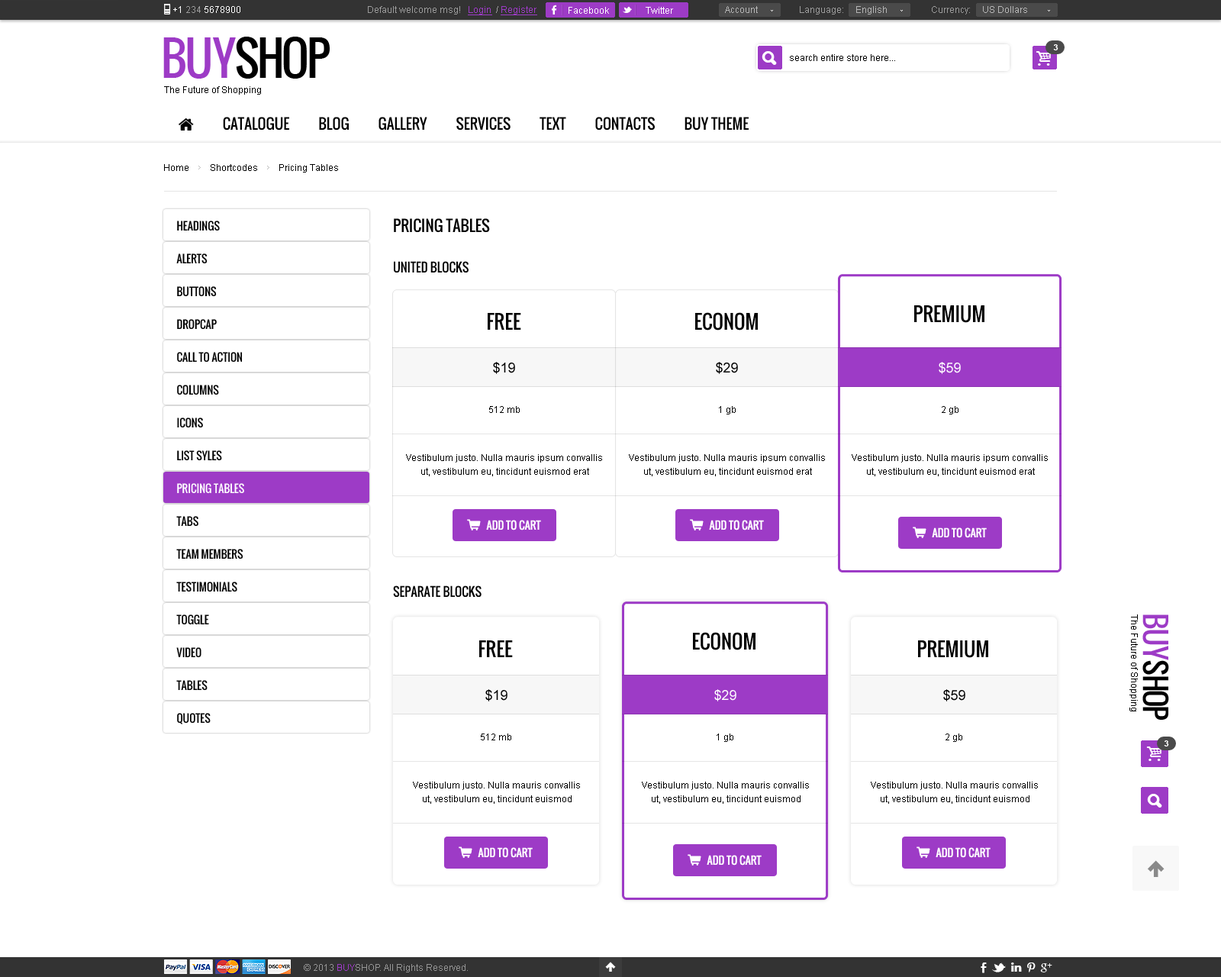
<style>
.page{position:relative;width:1221px;height:977px;background:#ffffff}
.page>*{position:absolute;margin:0}
.t1{font:9.2px "ArialMT";color:#ffffff}
.t2{font:9.2px "ArialMT";color:#9b9b9b}
.t3{font:9.2px "ArialMT";color:#9d3bc6;text-decoration:underline}
.t4{font:9.2px "ArialMT";color:#b6b6b6}
.t5{font:45.8px "Oswald";letter-spacing:-0.06em;color:#000000;text-transform:uppercase}
.t6{font:45.8px "Oswald";letter-spacing:-0.06em;color:#9d3bc6;text-transform:uppercase}
.t7{font:8.4px "Arial-BoldMT";color:#ffffff;text-transform:uppercase}
.t8{font:9.2px "ArialMT";color:#000000}
.t9{font:10.7px/32.8px "Oswald";color:#000000;text-transform:uppercase}
.t10{font:10.7px/32.8px "Oswald";color:#ffffff;text-transform:uppercase}
.t11{font:15.3px "Oswald";color:#000000;text-transform:uppercase}
.t12{font:12.2px "Oswald";color:#000000;text-transform:uppercase}
.t13{font:19.1px "Oswald";color:#000000;text-transform:uppercase}
.t14{font:13.7px "ArialMT";color:#000000}
.t15{font:13.7px "ArialMT";color:#ffffff}
.t16{font:9.2px/13.7px "ArialMT";color:#000000}
.t17{font:10.7px "Oswald";color:#ffffff}
.t18{font:29px "Oswald";letter-spacing:-0.06em;color:#000000;text-transform:uppercase}
.t19{font:29px "Oswald";letter-spacing:-0.06em;color:#9d3bc6;text-transform:uppercase}
.t20{font:9.2px "ArialMT";color:#959595}
.t21{font:9.2px "ArialMT";color:#9d3bc6}
</style>
<div class="page">
<p class="t1" style="left:173px;top:6px;width:67px;height:7px">+1 <span class="t2">234 </span>5678900</p>
<p class="t2" style="left:368px;top:6px;width:169px;height:9px">Default welcome msg!   <span class="t3">Login </span> / <span class="t3">Register</span></p>
<p class="t2" style="left:368px;top:6px;width:169px;height:9px">Default welcome msg!   <span class="t3">Login </span> / <span class="t3">Register</span></p>
<p class="t1" style="left:568px;top:7px;width:41px;height:7px">Facebook</p>
<p class="t1" style="left:646px;top:7px;width:27px;height:7px">Twitter</p>
<p class="t4" style="left:725px;top:6px;width:33px;height:7px">Account</p>
<p class="t2" style="left:800px;top:6px;width:87px;height:8px">Language:     <span class="t4">English</span></p>
<p class="t4" style="left:932px;top:6px;width:95px;height:8px"><span class="t2">Currency:     </span>US Dollars</p>
<p class="t5" style="left:163px;top:37px;width:167px;height:42px"><span class="t6">buy</span>shop</p>
<p class="t7" style="left:1053px;top:44px;width:5px;height:6px">3</p>
<p class="t8" style="left:790px;top:54px;width:105px;height:7px">search entire store here...</p>
<p class="t8" style="left:164px;top:86px;width:97px;height:9px">The Future of Shopping</p>
<p class="t8" style="left:164px;top:164px;width:174px;height:8px">Home         Shortcodes         Pricing Tables</p>
<p class="t9" style="left:176px;top:221px;width:68px;height:503px">Headings<br>Alerts<br>Buttons<br>Dropcap<br>Call To Action<br>Columns<br>Icons<br>List syles<br><span class="t10">Pricing Tables<br></span>Tabs<br>Team Members<br>Testimonials<br>Toggle<br>Video<br>Tables<br>Quotes</p>
<p class="t11" style="left:394px;top:218px;width:96px;height:15px">Pricing tables</p>
<p class="t12" style="left:394px;top:261px;width:75px;height:12px">United BLOCKS</p>
<p class="t13" style="left:914px;top:305px;width:70px;height:18px">PREMIUM</p>
<p class="t13" style="left:488px;top:313px;width:33px;height:17px">FREE</p>
<p class="t13" style="left:695px;top:312px;width:63px;height:18px">ECONOM</p>
<p class="t14" style="left:493px;top:362px;width:22px;height:12px">$19</p>
<p class="t14" style="left:716px;top:362px;width:22px;height:12px">$29</p>
<p class="t15" style="left:939px;top:362px;width:22px;height:12px">$59</p>
<p class="t8" style="left:489px;top:406px;width:31px;height:7px">512 mb</p>
<p class="t8" style="left:719px;top:406px;width:17px;height:8px">1 gb</p>
<p class="t8" style="left:942px;top:406px;width:16px;height:8px">2 gb</p>
<p class="t16" style="left:406px;top:454px;width:196px;height:22px;text-align:center">Vestibulum justo. Nulla mauris ipsum convallis<br>ut, vestibulum eu, tincidunt euismod erat</p>
<p class="t16" style="left:629px;top:454px;width:196px;height:22px;text-align:center">Vestibulum justo. Nulla mauris ipsum convallis<br>ut, vestibulum eu, tincidunt euismod erat</p>
<p class="t16" style="left:852px;top:454px;width:196px;height:22px;text-align:center">Vestibulum justo. Nulla mauris ipsum convallis<br>ut, vestibulum eu, tincidunt euismod erat</p>
<p class="t17" style="left:486px;top:520px;width:55px;height:10px">ADD TO CART</p>
<p class="t17" style="left:709px;top:520px;width:55px;height:10px">ADD TO CART</p>
<p class="t17" style="left:932px;top:527px;width:55px;height:11px">ADD TO CART</p>
<p class="t12" style="left:393px;top:585px;width:88px;height:12px">SEPARATE BLOCKS</p>
<p class="t8" style="left:1129px;top:614px;width:9px;height:97px;rotate:90deg">The Future of Shopping</p>
<p class="t18" style="left:1142px;top:614px;width:27px;height:106px;rotate:90deg"><span class="t19">buy</span>shop</p>
<p class="t13" style="left:479px;top:640px;width:34px;height:17px">FREE</p>
<p class="t13" style="left:693px;top:632px;width:62px;height:18px">ECONOM</p>
<p class="t13" style="left:918px;top:640px;width:70px;height:18px">PREMIUM</p>
<p class="t14" style="left:485px;top:689px;width:22px;height:12px">$19</p>
<p class="t15" style="left:714px;top:689px;width:22px;height:12px">$29</p>
<p class="t14" style="left:943px;top:689px;width:22px;height:12px">$59</p>
<p class="t8" style="left:481px;top:733px;width:30px;height:7px">512 mb</p>
<p class="t8" style="left:717px;top:733px;width:16px;height:9px">1 gb</p>
<p class="t8" style="left:945px;top:733px;width:17px;height:9px">2 gb</p>
<p class="t7" style="left:1164px;top:740px;width:5px;height:6px">3</p>
<p class="t16" style="left:413px;top:781px;width:167px;height:22px;text-align:center">Vestibulum justo. Nulla mauris convallis<br>ut, vestibulum eu, tincidunt euismod</p>
<p class="t16" style="left:642px;top:781px;width:167px;height:22px;text-align:center">Vestibulum justo. Nulla mauris convallis<br>ut, vestibulum eu, tincidunt euismod</p>
<p class="t16" style="left:871px;top:781px;width:167px;height:22px;text-align:center">Vestibulum justo. Nulla mauris convallis<br>ut, vestibulum eu, tincidunt euismod</p>
<p class="t17" style="left:478px;top:847px;width:55px;height:11px">ADD TO CART</p>
<p class="t17" style="left:707px;top:855px;width:55px;height:10px">ADD TO CART</p>
<p class="t17" style="left:935px;top:847px;width:55px;height:11px">ADD TO CART</p>
<p class="t20" style="left:304px;top:964px;width:164px;height:8px">© 2013 <span class="t21">BUY</span>SHOP. All Rights Reserved.</p>
</div>
